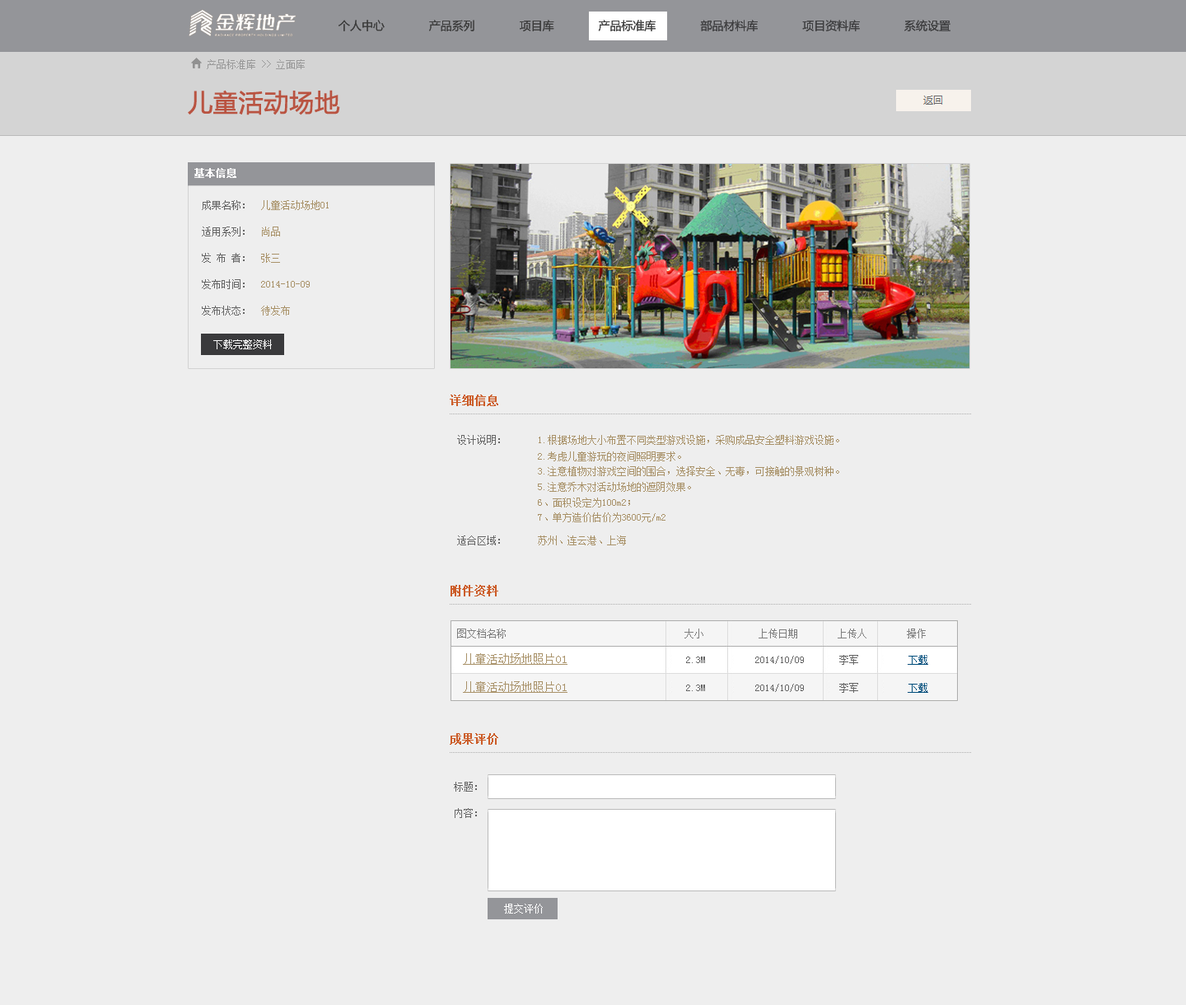
<style>
.page{position:relative;width:1186px;height:1005px;background:#eeeeee}
.page>*{position:absolute;margin:0}
.t1{font:11.5px "MicrosoftYaHei";color:#3c3c3c}
.t2{font:11.5px "MicrosoftYaHei";color:#3d3d3f}
.t3{font:9.9px "SimSun";color:#999999}
.t4{font:24.7px "MicrosoftYaHei";color:#b95341;font-weight:bold}
.t5{font:9.9px "SimSun";color:#ffffff;font-weight:bold}
.t6{font:9.9px/26.4px "SimSun";color:#a99269}
.t7{font:9.9px/26.4px "SimSun";color:#666666}
.t8{font:9.9px "SimSun";color:#ffffff}
.t9{font:11.5px "SimSun";color:#cc5d29;font-weight:bold}
.t10{font:9.9px "SimSun";color:#7f7f7f}
.t11{font:9.9px/28px "SimSun";color:#666666}
.t12{font:11.5px/28px "SimSun";color:#a99269;text-decoration:underline}
.t13{font:9.9px/28px "SimSun";color:#004d7b;text-decoration:underline}
</style>
<div class="page">
<p class="t1" style="left:339px;top:20px;width:612px;height:11px">个人中心             产品系列             项目库             产品标准库             部品材料库             项目资料库             系统设置</p>
<p class="t1" style="left:339px;top:20px;width:612px;height:11px">个人中心             产品系列             项目库             产品标准库             <span class="t2">部品材料库             项目资料库             系统设置</span></p>
<p class="t3" style="left:207px;top:59px;width:98px;height:10px">产品标准库 &gt;&gt; 立面库</p>
<p class="t4" style="left:188px;top:90px;width:152px;height:25px">儿童活动场地</p>
<p class="t5" style="left:194px;top:168px;width:42px;height:10px">基本信息</p>
<p class="t6" style="left:202px;top:200px;width:127px;height:116px"><span class="t7">成果名称：  </span>儿童活动场地01<br><span class="t7">适用系列：  </span>尚品<br><span class="t7">发 布 者：  </span>张三<br><span class="t7">发布时间：  </span>2014-10-09<br><span class="t7">发布状态：  </span>待发布</p>
<p class="t8" style="left:213px;top:339px;width:59px;height:10px">下载完整资料</p>
<p class="t9" style="left:450px;top:395px;width:48px;height:11px">详细信息</p>
<p class="t9" style="left:451px;top:585px;width:47px;height:11px">附件资料</p>
<p class="t10" style="left:457px;top:629px;width:469px;height:9px">图文档名称                                    大小           上传日期        上传人        操作</p>
<p class="t11" style="left:463px;top:653px;width:465px;height:40px"><span class="t12">儿童活动场地照片01                       </span> 2.3M          2014/10/09       李军          <span class="t13">下载<br></span><span class="t12">儿童活动场地照片01              </span>          2.3M          2014/10/09       李军          <span class="t13">下载</span></p>
<p class="t9" style="left:450px;top:733px;width:48px;height:12px">成果评价</p>
<p class="t7" style="left:454px;top:782px;width:23px;height:36px">标题：<br>内容：</p>
<p class="t8" style="left:504px;top:904px;width:39px;height:10px">提交评价</p>
</div>
